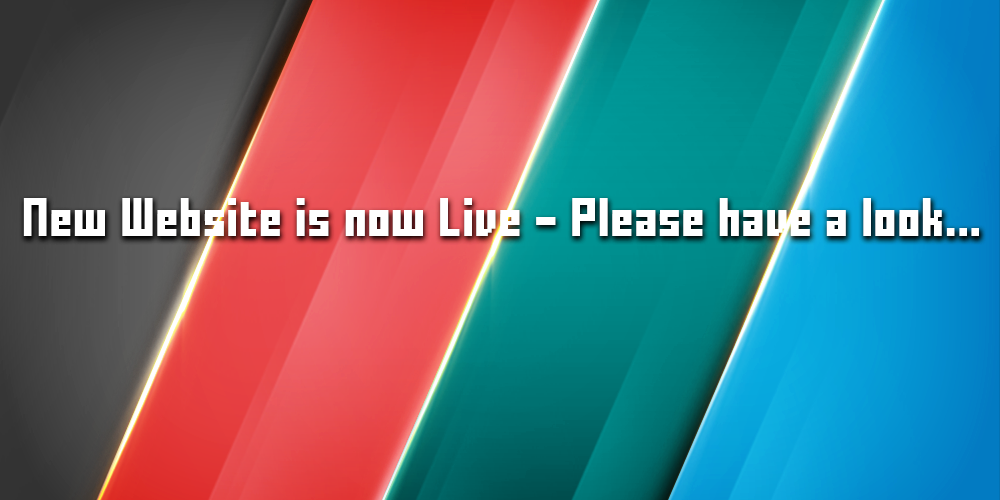
<style>
.page{position:relative;width:1000px;height:500px}
.page>*{position:absolute;margin:0}
.t1{font:30px "FFFForward";letter-spacing:0.04em;color:#ffffff}
</style>
<div class="page">
<p class="t1" style="left:23px;top:198px;width:956px;height:38px">New Website is now Live - Please have a look...</p>
</div>
